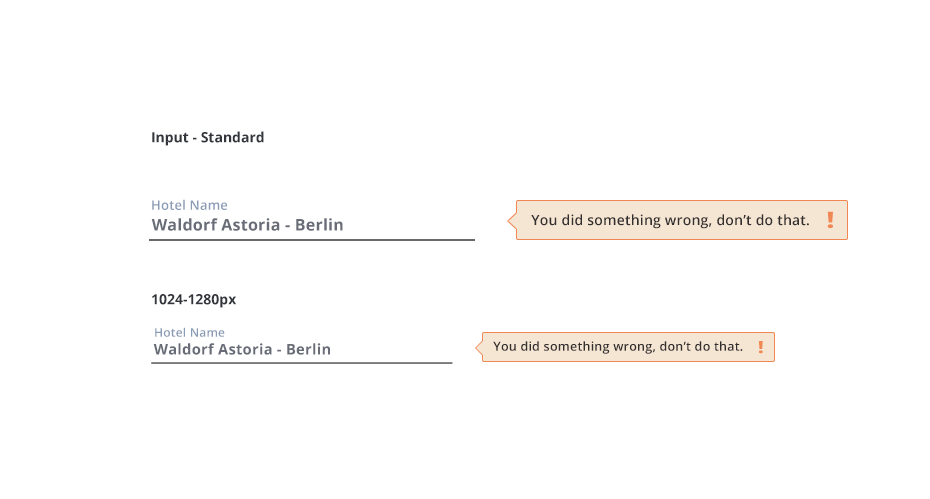
<style>
.page{position:relative;width:930px;height:499px;background:#ffffff}
.page>*{position:absolute;margin:0}
.t1{font:14px "OpenSans-Bold";color:#32353b}
.t2{font:13px "OpenSans-Semibold";letter-spacing:0.015em;color:#8a9bb6}
.t3{font:16px "OpenSans-Bold";letter-spacing:0.015em;color:#676c76}
.t4{font:14px "OpenSans-Semibold";letter-spacing:0.015em;color:#332f2f}
.t5{font:22.3px "OpenSans-Bold";letter-spacing:0.015em;color:#f18854;scale:1.38 1}
.t6{font:12px "OpenSans-Semibold";letter-spacing:0.015em;color:#8a9bb6}
.t7{font:12.5px "OpenSans-Semibold";letter-spacing:0.015em;color:#332f2f}
.t8{font:16.7px "OpenSans-Bold";letter-spacing:0.015em;color:#f18854;scale:1.38 1}
.t9{font:14.8px "OpenSans-Bold";letter-spacing:0.015em;color:#676c76}
</style>
<div class="page">
<p class="t1" style="left:152px;top:131px;width:112px;height:15px">Input - Standard</p>
<p class="t2" style="left:152px;top:199px;width:75px;height:11px">Hotel Name</p>
<p class="t3" style="left:151px;top:218px;width:192px;height:13px">Waldorf Astoria - Berlin</p>
<p class="t4" style="left:531px;top:214px;width:278px;height:15px">You did something wrong, don’t do that.</p>
<p class="t5" style="left:827px;top:211px;width:6px;height:17px">!</p>
<p class="t1" style="left:152px;top:294px;width:84px;height:14px">1024-1280px</p>
<p class="t6" style="left:155px;top:327px;width:70px;height:10px">Hotel Name</p>
<p class="t7" style="left:493px;top:341px;width:250px;height:13px">You did something wrong, don’t do that.</p>
<p class="t8" style="left:758px;top:341px;width:5px;height:13px">!</p>
<p class="t9" style="left:153px;top:343px;width:177px;height:12px">Waldorf Astoria - Berlin</p>
</div>
